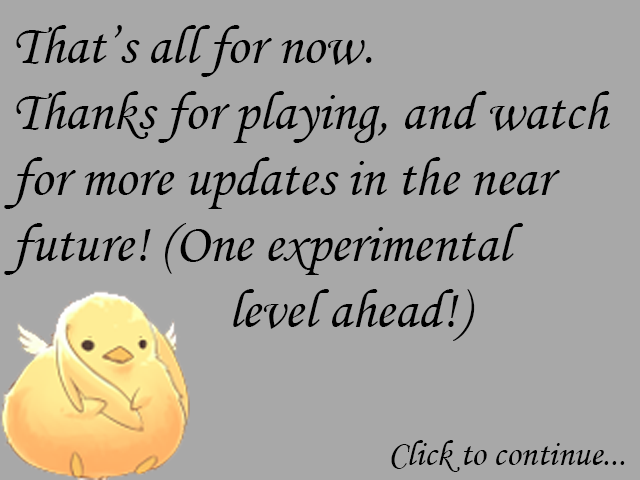
<style>
.page{position:relative;width:640px;height:480px;background:#a8a8a8}
.page>*{position:absolute;margin:0}
.t1{font:55px "MonotypeCorsiva";color:#000000}
.t2{font:36px "MonotypeCorsiva";color:#000000}
</style>
<div class="page">
<p class="t1" style="left:4px;top:25px;width:606px;height:316px">That’s all for now.<br>Thanks for playing, and watch for more updates in the near future! (One experimental <br>      level ahead!)</p>
<p class="t2" style="left:391px;top:440px;width:234px;height:32px">Click to continue...</p>
</div>
